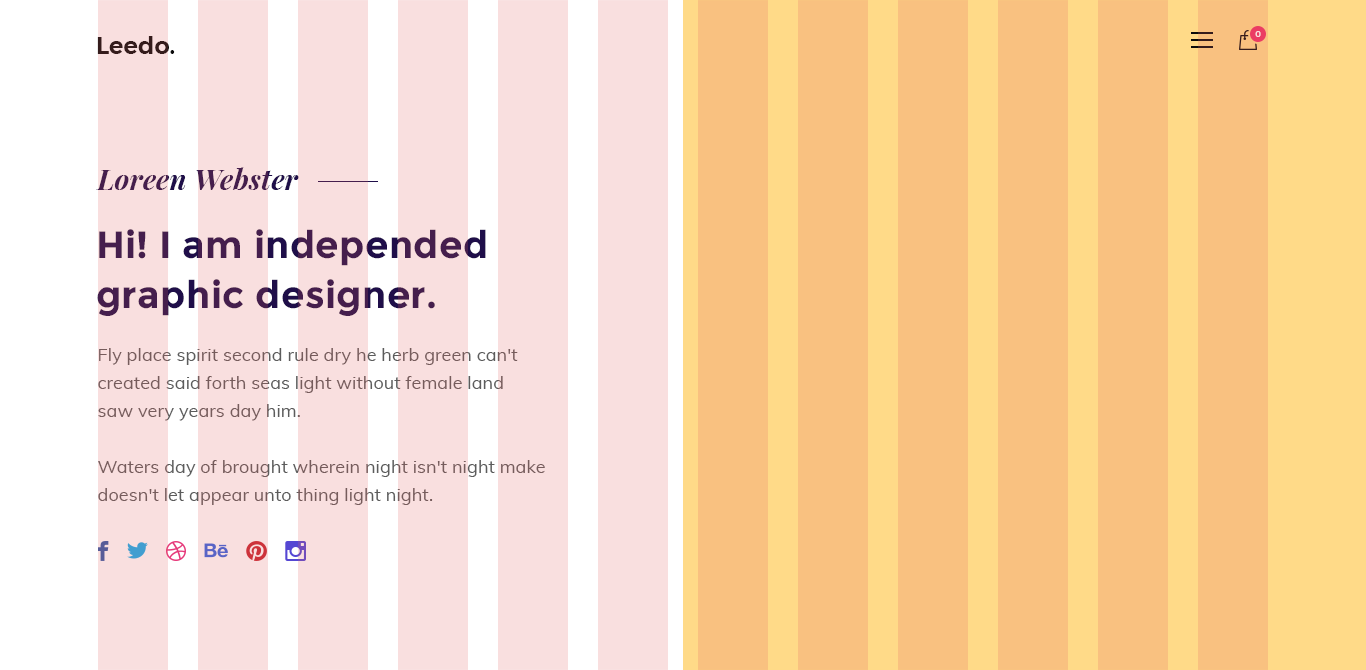
<style>
.page{position:relative;width:1366px;height:670px;background:#f9c180}
.page>*{position:absolute;margin:0}
.t1{font:24px "Montserrat-SemiBold";color:#351c1c}
.t2{font:8px "Montserrat-Medium";letter-spacing:0.05em;color:#f9dfdf;text-transform:uppercase}
.t3{font:28px "PlayfairDisplay-BoldItalic";letter-spacing:0.01em;color:#451e4d}
.t4{font:38px/50px "Montserrat-Bold";letter-spacing:0.01em;color:#451e4d}
.t5{font:18px/28px "Muli-Regular";letter-spacing:0.005em;color:#765c5c}
</style>
<div class="page">
<p class="t1" style="left:97px;top:36px;width:78px;height:18px">Leedo.</p>
<p class="t2" style="left:1255px;top:31px;width:6px;height:6px">0</p>
<p class="t3" style="left:96px;top:167px;width:203px;height:23px">Loreen Webster</p>
<p class="t4" style="left:97px;top:229px;width:389px;height:87px">Hi! I am independed<br>graphic designer.</p>
<p class="t5" style="left:98px;top:348px;width:447px;height:157px">Fly place spirit second rule dry he herb green can't <br>created said forth seas light without female land <br>saw very years day him.<br><br>Waters day of brought wherein night isn't night make <br>doesn't let appear unto thing light night.</p>
</div>
